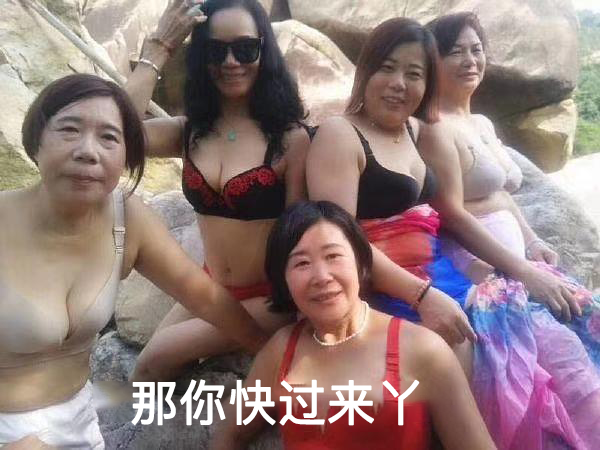
<style>
.page{position:relative;width:600px;height:450px}
.page>*{position:absolute;margin:0}
.t1{font:48px "PingFangSC-Regular";color:#ffffff;font-weight:bold}
</style>
<div class="page">
<p class="t1" style="left:131px;top:379px;width:289px;height:47px">那你快过来丫</p>
</div>
